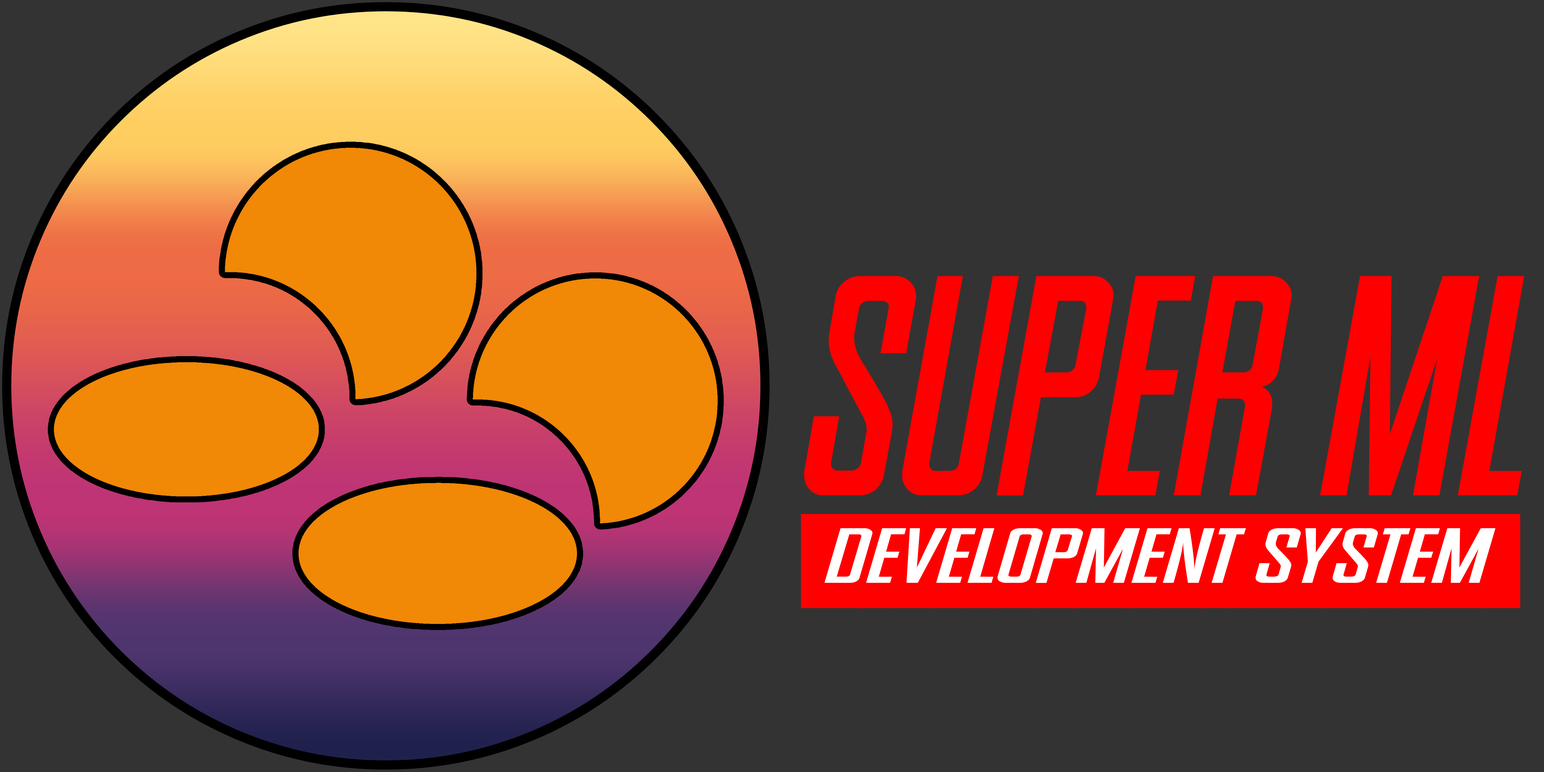
<style>
.page{position:relative;width:1544px;height:772px;background:#333333}
.page>*{position:absolute;margin:0}
.t1{font:313.2px "SNES-Italic";color:#ff0000}
.t2{font:78px "SNES-Italic";color:#ff0000;scale:1.62 1}
</style>
<div class="page">
<p class="t1" style="left:804px;top:276px;width:720px;height:220px">Super ML</p>
<p class="t2" style="left:801px;top:514px;width:720px;height:95px">Development System</p>
</div>
